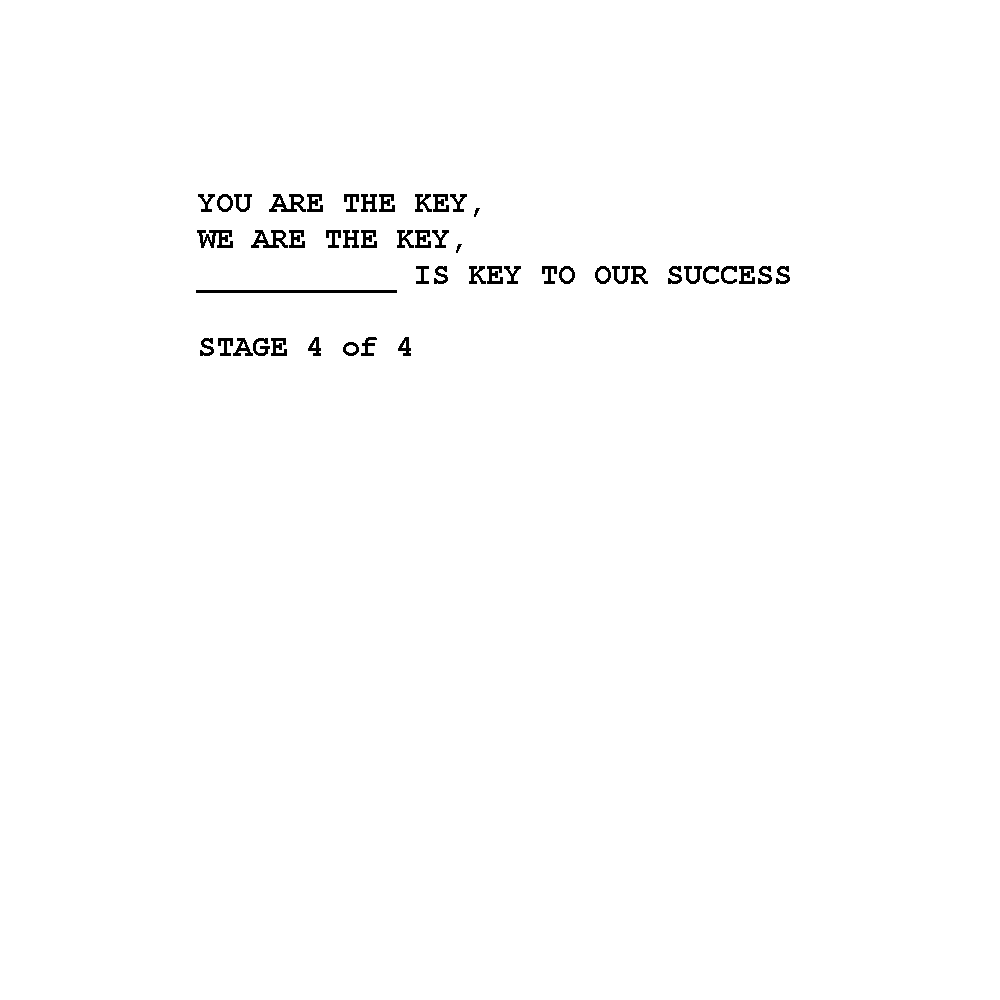
<style>
.page{position:relative;width:1000px;height:1000px;background:#ffffff}
.page>*{position:absolute;margin:0}
.t1{font:30px "CourierNewPS-BoldMT";color:#000000}
</style>
<div class="page">
<p class="t1" style="left:196px;top:194px;width:594px;height:162px">YOU ARE THE KEY,<br>WE ARE THE KEY,<br>___________ IS KEY TO OUR SUCCESS<br><br>STAGE 4 of 4</p>
</div>
